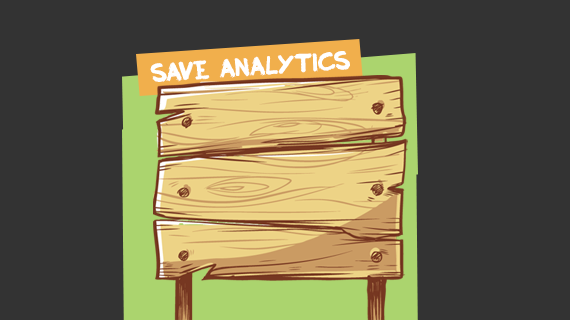
<style>
.page{position:relative;width:570px;height:320px;background:#333333}
.page>*{position:absolute;margin:0}
.t1{font:25px "Inky";color:#ffffff}
</style>
<div class="page">
<p class="t1" style="left:150px;top:51px;width:200px;height:31px;rotate:-4deg">save analytics</p>
</div>
